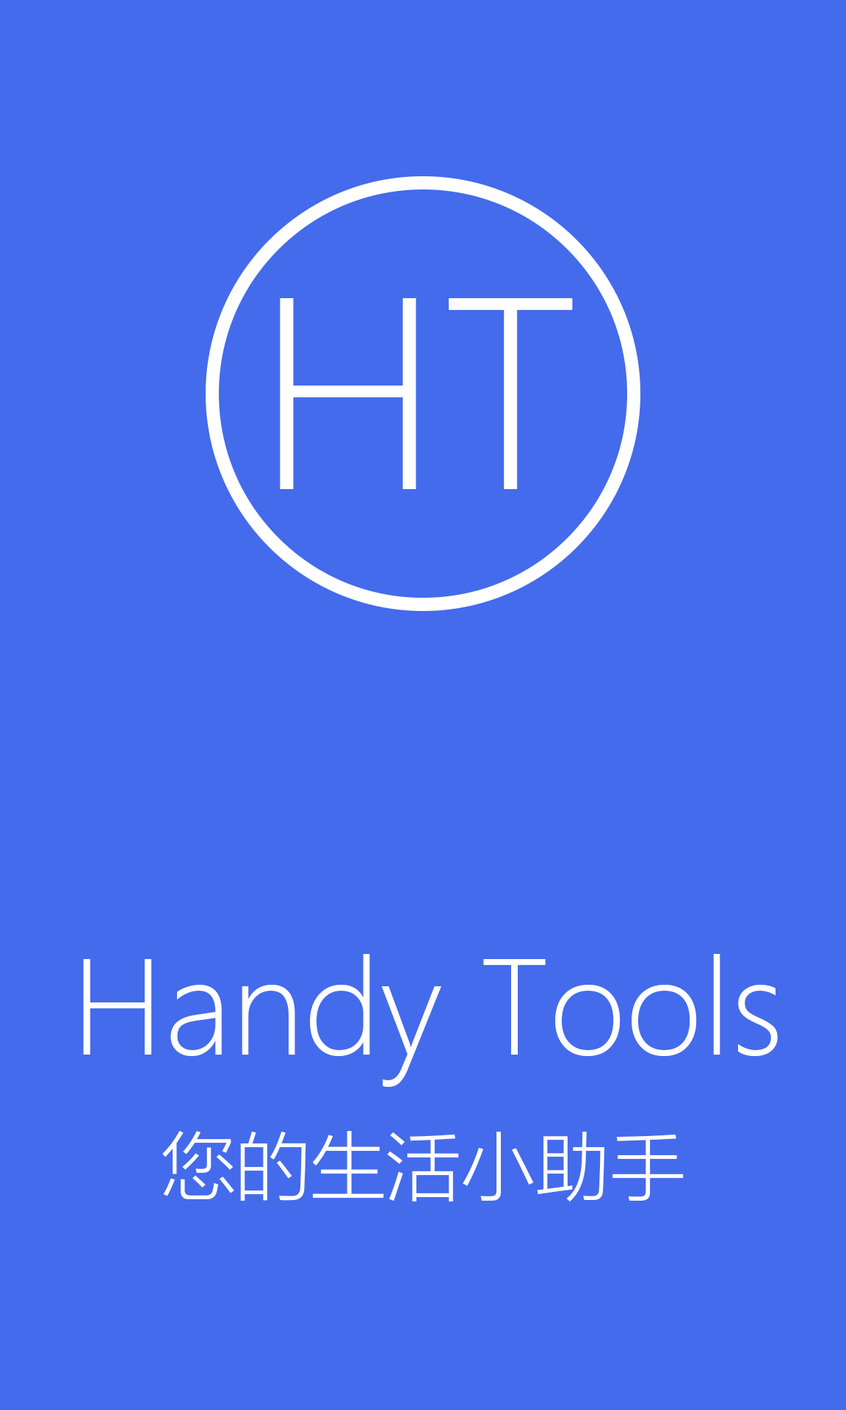
<style>
.page{position:relative;width:846px;height:1410px;background:#446beb}
.page>*{position:absolute;margin:0}
.t1{font:126.3px "MicrosoftYaHeiLight";color:#ffffff}
.t2{font:74.9px "MicrosoftYaHeiLight";color:#ffffff}
</style>
<div class="page">
<p class="t1" style="left:83px;top:954px;width:695px;height:133px">Handy Tools</p>
<p class="t2" style="left:162px;top:1131px;width:522px;height:70px">您的生活小助手</p>
</div>
